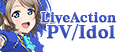
<style>
.page{position:relative;width:118px;height:52px;background:#ffffff}
.page>*{position:absolute;margin:0}
.t1{font:13px "FOT-MathIsElegant-Pro";color:#374fbd;font-weight:bold}
.t2{font:17px "FOT-MathIsElegant-Pro";color:#3a53c2;font-weight:bold}
</style>
<div class="page">
<p class="t1" style="left:41px;top:12px;width:75px;height:12px">LiveAction</p>
<p class="t2" style="left:47px;top:24px;width:68px;height:17px">PV/Idol</p>
</div>
